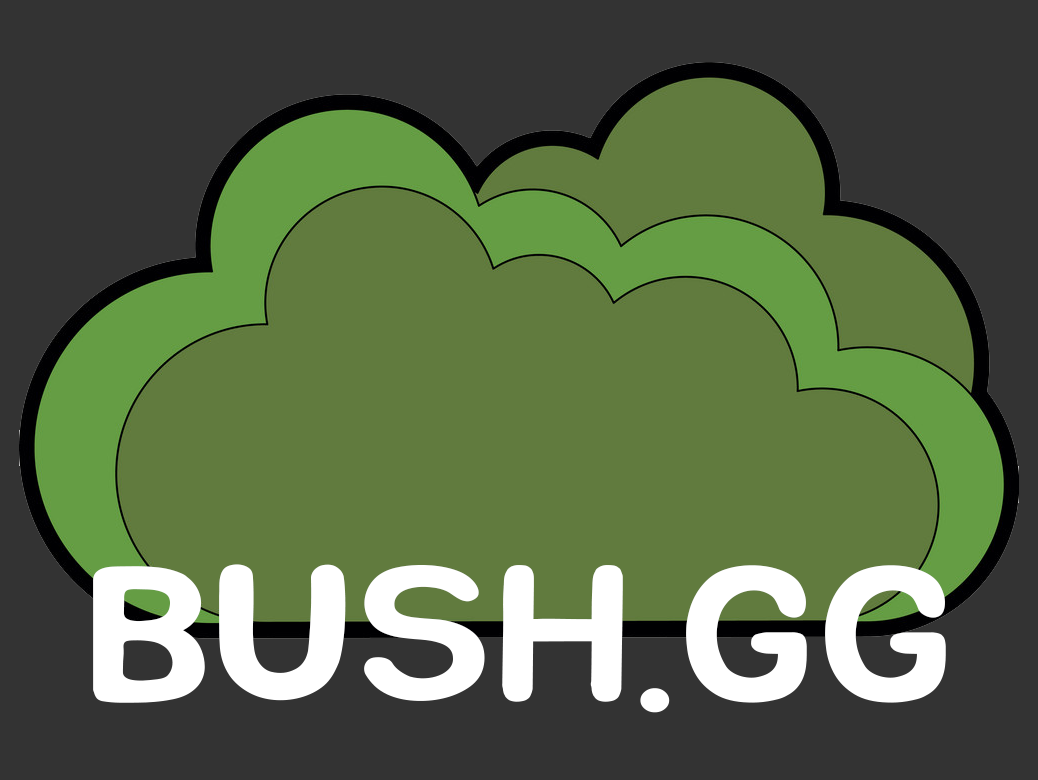
<style>
.page{position:relative;width:1038px;height:780px;background:#333333}
.page>*{position:absolute;margin:0}
.t1{font:190.2px "BMJUA";color:#ffffff;scale:1.2 1}
</style>
<div class="page">
<p class="t1" style="left:93px;top:564px;width:853px;height:149px">BUSH.GG</p>
</div>
